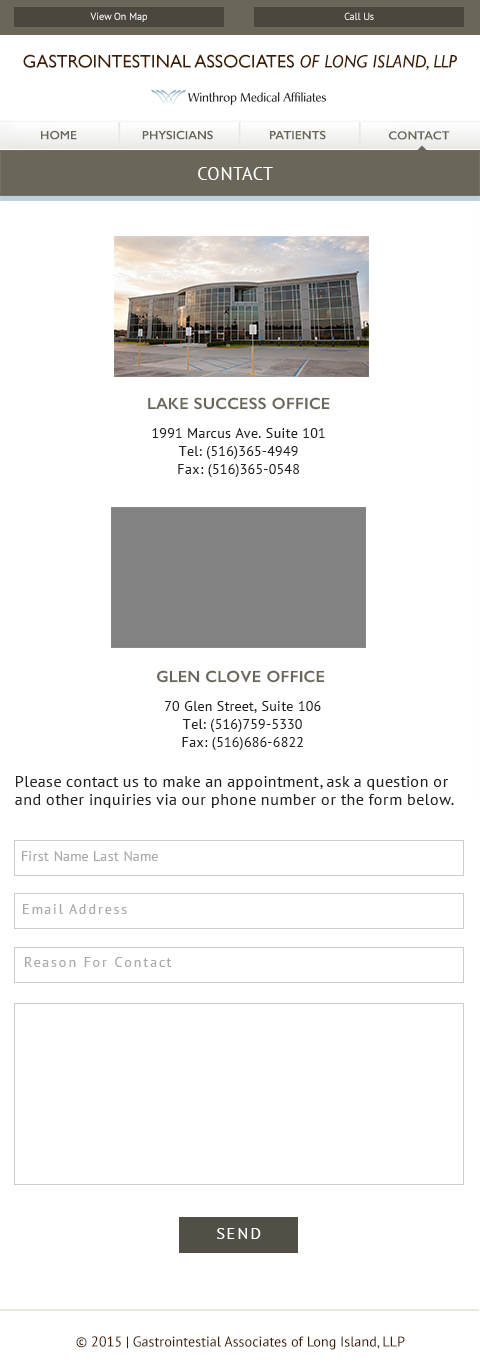
<style>
.page{position:relative;width:480px;height:1371px;background:#ffffff}
.page>*{position:absolute;margin:0}
.t1{font:10.1px "PTSans-Regular";color:#ffffff}
.t2{font:10.1px "PTSans-Regular"}
.t3{font:18.2px "GillSans";color:#401c01}
.t4{font:18.2px "GillSans-Italic";color:#401c01}
.t5{font:12.2px "GillSans-SemiBold";color:#6b665a}
.t6{font:12.1px "GillSans-SemiBold";color:#6b665a}
.t7{font:18.3px "PTSans-Regular";letter-spacing:0.02em;color:#ffffff;text-transform:uppercase}
.t8{font:16.2px "GillSans-SemiBold";letter-spacing:0.02em;color:#6b665a;text-transform:uppercase}
.t9{font:14.2px/18.2px "PTSans-Regular";letter-spacing:0.02em;color:#222222}
.t10{font:16.2px/18px "PTSans-Regular";letter-spacing:0.02em;color:#222222}
.t11{font:14px "PTSans-Regular";letter-spacing:0.02em;color:#aaaaaa}
.t12{font:14px "PTSans-Regular";letter-spacing:0.12em;color:#aaaaaa}
.t13{font:16px "PTSans-Regular";letter-spacing:0.12em;color:#ffffff;text-transform:uppercase}
.t14{font:14.2px "PTSans-Regular";color:#401c01}
</style>
<div class="page">
<p class="t1" style="left:90px;top:12px;width:57px;height:10px">View On Map</p>
<p class="t2" style="left:344px;top:12px;width:30px;height:8px">Call Us</p>
<p class="t3" style="left:23px;top:54px;width:434px;height:16px">GASTROINTESTINAL ASSOCIATES <span class="t4">OF LONG ISLAND, LLP</span></p>
<p class="t5" style="left:41px;top:130px;width:36px;height:10px">HOME</p>
<p class="t5" style="left:142px;top:130px;width:71px;height:10px">PHYSICIANS</p>
<p class="t5" style="left:270px;top:130px;width:56px;height:10px">PATIENTS</p>
<p class="t6" style="left:388px;top:131px;width:62px;height:9px">CONTACT</p>
<p class="t7" style="left:198px;top:167px;width:75px;height:13px">Contact</p>
<p class="t8" style="left:148px;top:397px;width:182px;height:13px">lAKE sUCCESS oFFICE</p>
<p class="t9" style="left:152px;top:428px;width:173px;height:49px;text-align:center">1991 Marcus Ave. Suite 101<br>Tel: (516)365-4949<br>Fax: (516)365-0548</p>
<p class="t8" style="left:156px;top:670px;width:169px;height:13px">Glen Clove oFFICE</p>
<p class="t9" style="left:165px;top:701px;width:156px;height:49px;text-align:center">70 Glen Street, Suite 106<br>Tel: (516)759-5330<br>Fax: (516)686-6822</p>
<p class="t10" style="left:15px;top:776px;width:439px;height:32px">Please contact us to make an appointment, ask a question or and other inquiries via our phone number or the form below.</p>
<p class="t11" style="left:22px;top:851px;width:136px;height:10px">First Name Last Name</p>
<p class="t12" style="left:23px;top:904px;width:104px;height:10px">Email Address</p>
<p class="t12" style="left:25px;top:957px;width:147px;height:10px">Reason For Contact</p>
<p class="t13" style="left:217px;top:1228px;width:44px;height:11px">SEND</p>
<p class="t14" style="left:76px;top:1336px;width:329px;height:14px">© 2015 | Gastrointestial Associates of Long Island, LLP</p>
</div>
